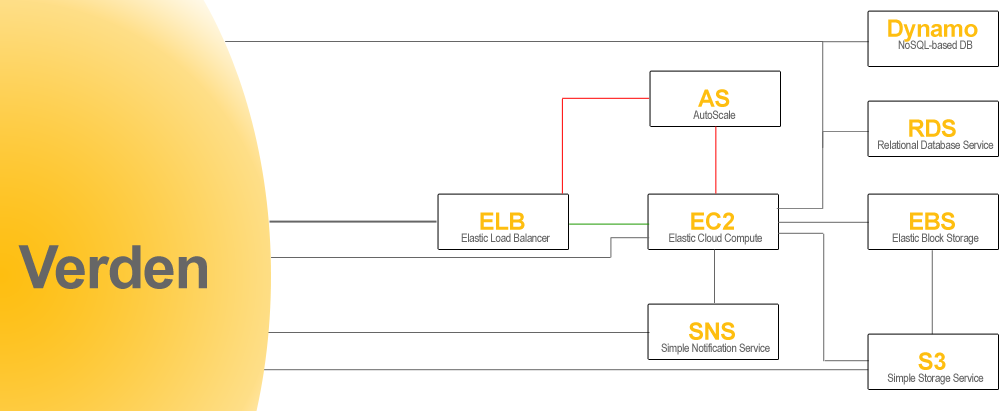
<style>
.page{position:relative;width:1006px;height:411px;background:#ffffff}
.page>*{position:absolute;margin:0}
.t1{font:24px "Arial-BoldMT";letter-spacing:-0.025em;color:#febe10}
.t2{font:12px "ArialNarrow";letter-spacing:-0.025em;color:#666666}
.t3{font:60px "Arial-BoldMT";letter-spacing:-0.025em;color:#666666}
</style>
<div class="page">
<p class="t1" style="left:888px;top:19px;width:90px;height:23px">Dynamo</p>
<p class="t2" style="left:898px;top:40px;width:75px;height:10px">NoSQL-based DB</p>
<p class="t1" style="left:698px;top:89px;width:32px;height:18px">AS</p>
<p class="t2" style="left:693px;top:110px;width:43px;height:9px">AutoScale</p>
<p class="t1" style="left:909px;top:119px;width:47px;height:18px">RDS</p>
<p class="t2" style="left:878px;top:140px;width:116px;height:9px">Relational Database Service</p>
<p class="t1" style="left:480px;top:212px;width:45px;height:18px">ELB</p>
<p class="t1" style="left:691px;top:212px;width:43px;height:18px">EC2</p>
<p class="t1" style="left:910px;top:212px;width:45px;height:18px">EBS</p>
<p class="t2" style="left:461px;top:233px;width:89px;height:9px">Elastic Load Balancer</p>
<p class="t2" style="left:669px;top:233px;width:93px;height:12px">Elastic Cloud Compute</p>
<p class="t2" style="left:892px;top:233px;width:87px;height:12px">Elastic Block Storage</p>
<p class="t3" style="left:18px;top:245px;width:189px;height:44px">Verden</p>
<p class="t1" style="left:689px;top:322px;width:46px;height:18px">SNS</p>
<p class="t2" style="left:661px;top:343px;width:109px;height:12px">Simple Notification Service</p>
<p class="t1" style="left:918px;top:352px;width:28px;height:18px">S3</p>
<p class="t2" style="left:887px;top:373px;width:97px;height:12px">Simple Storage Service</p>
</div>
